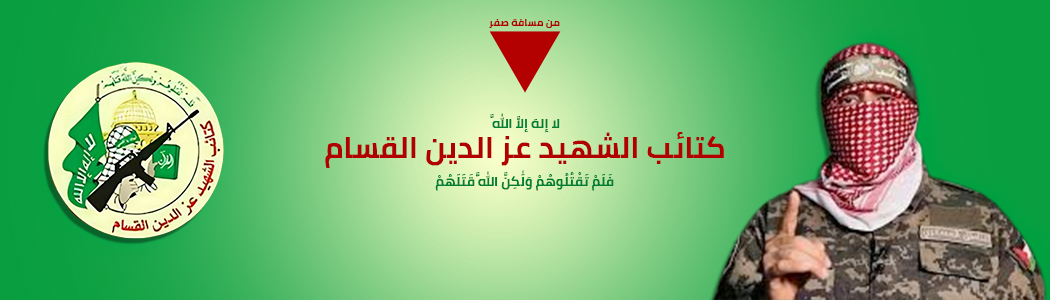
<style>
.page{position:relative;width:1050px;height:300px}
.page>*{position:absolute;margin:0}
.t1{font:10.3px "Cairo-Bold";color:#990000}
.t2{font:13.5px "Cairo-Bold";color:#00722d}
.t3{font:30px "Cairo-Bold";color:#990000}
</style>
<div class="page">
<p class="t1" style="left:489px;top:19px;width:71px;height:9px">من مسافة صفر</p>
<p class="t2" style="left:490px;top:113px;width:70px;height:20px">لا إلهَ إلاَّ اللَّه</p>
<p class="t3" style="left:325px;top:132px;width:399px;height:36px">كتائب الشهيد عز الدين القسام</p>
<p class="t2" style="left:435px;top:170px;width:179px;height:21px">فَلَمْ تَقْتُلُوهُمْ وَلَٰكِنَّ اللَّهَ قَتَلَهُمْ</p>
</div>
